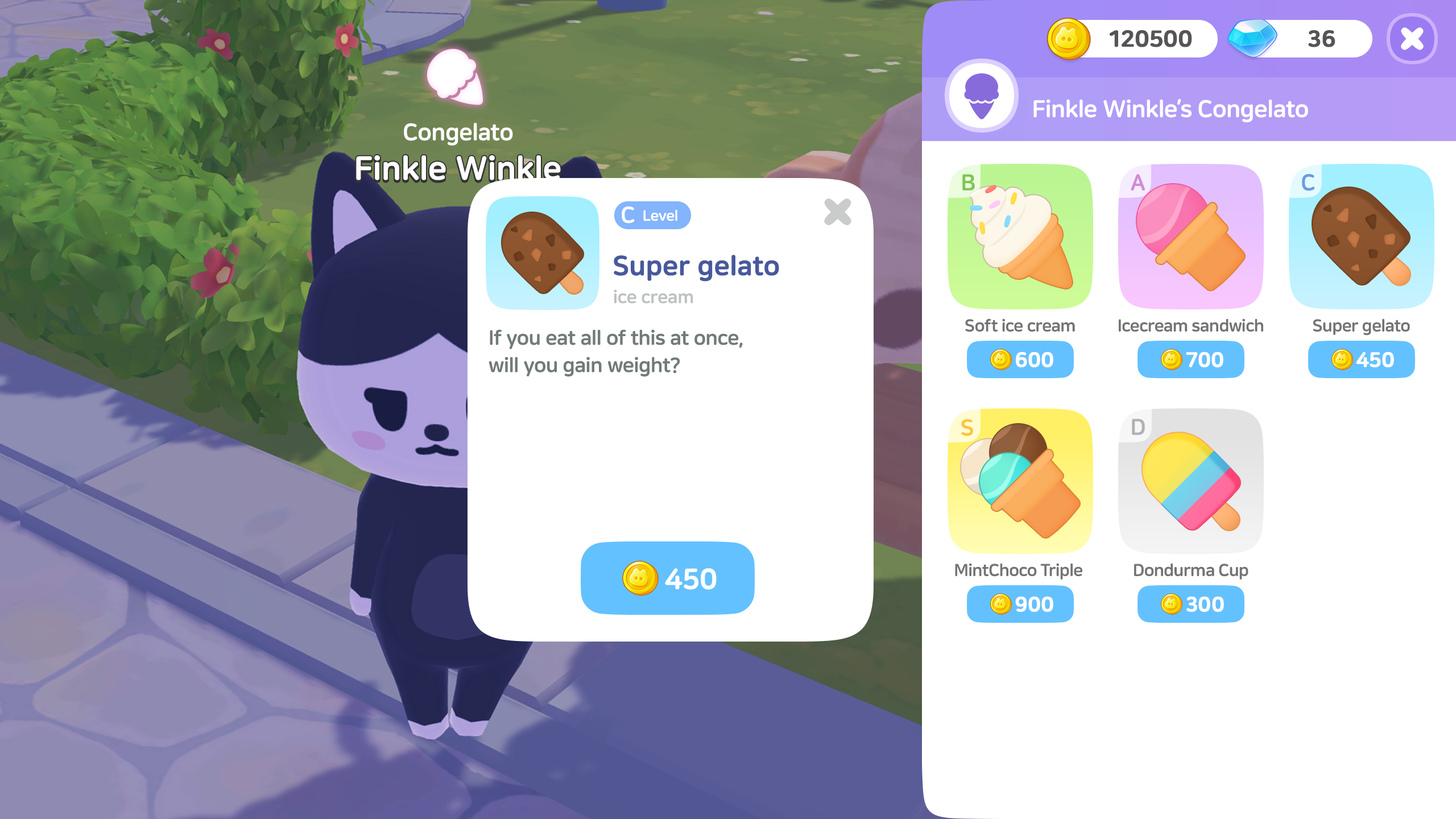
<style>
.page{position:relative;width:1456px;height:819px;background:#ffffff}
.page>*{position:absolute;margin:0}
.t1{font:22.7px "NanumSquareRoundOTFEB";color:#555555;font-weight:bold}
.t2{font:23.9px "NanumSquareRoundOTFEB";letter-spacing:-0.02em;color:#ffffff}
.t3{font:23.7px "NanumSquareRoundOTFEB";letter-spacing:-0.02em;color:#ffffff}
.t4{font:32.6px "NanumSquareRoundOTFEB";letter-spacing:-0.02em;color:#ffffff;font-weight:bold}
.t5{font:22.7px "NanumSquareRoundOTFEB";color:#7dc750}
.t6{font:22.7px "NanumSquareRoundOTFEB";color:#d08cd4}
.t7{font:22.7px "NanumSquareRoundOTFEB";color:#6a9be4}
.t8{font:22.7px "NanumSquareRoundOTFEB";color:#ffffff}
.t9{font:14.8px "NanumSquareRoundOTFEB";letter-spacing:-0.02em;color:#ffffff}
.t10{font:27.3px "NanumSquareRoundOTFEB";letter-spacing:-0.02em;color:#47599d;font-weight:bold}
.t11{font:18.2px "NanumSquareRoundOTFEB";letter-spacing:-0.02em;color:#bdc2c0}
.t12{font:20.5px/27.3px "NanumSquareRoundOTFEB";letter-spacing:-0.02em;color:#727a7b}
.t13{font:17.1px "NanumSquareRoundOTFEB";letter-spacing:-0.03em;color:#737373}
.t14{font:20.5px "NanumSquareRoundOTFEB";color:#ffffff;font-weight:bold}
.t15{font:22.7px "NanumSquareRoundOTFEB";color:#fec43a}
.t16{font:22.7px "NanumSquareRoundOTFEB";color:#aeb2b6}
.t17{font:28.4px "NanumSquareRoundOTFEB";letter-spacing:-0.02em;color:#ffffff;font-weight:bold}
</style>
<div class="page">
<p class="t1" style="left:1110px;top:30px;width:82px;height:17px">120500</p>
<p class="t1" style="left:1308px;top:30px;width:27px;height:17px">36</p>
<p class="t2" style="left:1033px;top:99px;width:275px;height:23px">Finkle Winkle’s Congelato</p>
<p class="t3" style="left:404px;top:123px;width:109px;height:23px">Congelato</p>
<p class="t4" style="left:356px;top:155px;width:205px;height:25px">Finkle Winkle</p>
<p class="t5" style="left:962px;top:174px;width:13px;height:17px">B</p>
<p class="t6" style="left:1131px;top:174px;width:14px;height:17px">A</p>
<p class="t7" style="left:1302px;top:174px;width:13px;height:17px">C</p>
<p class="t8" style="left:622px;top:206px;width:13px;height:18px">C</p>
<p class="t9" style="left:643px;top:209px;width:34px;height:12px">Level</p>
<p class="t10" style="left:614px;top:255px;width:165px;height:27px">Super gelato</p>
<p class="t11" style="left:614px;top:289px;width:79px;height:15px">ice cream</p>
<p class="t12" style="left:489px;top:329px;width:254px;height:48px">If you eat all of this at once, <br>will you gain weight?</p>
<p class="t13" style="left:965px;top:318px;width:110px;height:14px">Soft ice cream</p>
<p class="t13" style="left:1119px;top:318px;width:144px;height:14px">Icecream sandwich</p>
<p class="t13" style="left:1313px;top:318px;width:97px;height:18px">Super gelato</p>
<p class="t14" style="left:1016px;top:351px;width:37px;height:16px">600</p>
<p class="t14" style="left:1186px;top:351px;width:37px;height:16px">700</p>
<p class="t14" style="left:1356px;top:351px;width:38px;height:16px">450</p>
<p class="t15" style="left:961px;top:419px;width:12px;height:17px">S</p>
<p class="t16" style="left:1132px;top:419px;width:13px;height:16px">D</p>
<p class="t17" style="left:665px;top:568px;width:52px;height:22px">450</p>
<p class="t13" style="left:955px;top:563px;width:128px;height:17px">MintChoco Triple</p>
<p class="t13" style="left:1134px;top:563px;width:114px;height:17px">Dondurma Cup</p>
<p class="t14" style="left:1015px;top:596px;width:38px;height:16px">900</p>
<p class="t14" style="left:1186px;top:596px;width:38px;height:16px">300</p>
</div>
